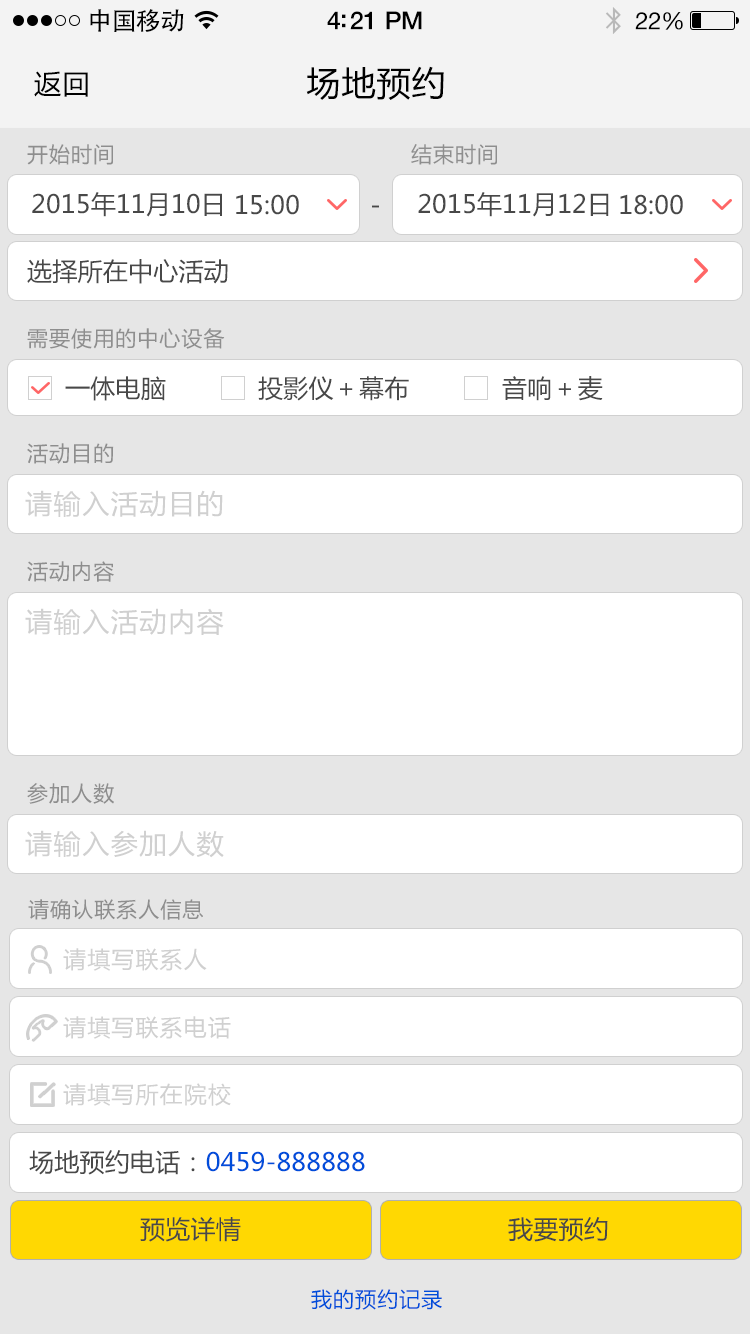
<style>
.page{position:relative;width:750px;height:1334px;background:#ffffff}
.page>*{position:absolute;margin:0}
.t1{font:25px "AdobeHeitiStd-Regular";letter-spacing:-0.025em;color:#000000}
.t2{font:25px "HelveticaNeue-Medium";letter-spacing:-0.02em;color:#000000}
.t3{font:24px "HelveticaNeue";letter-spacing:-0.02em;color:#000000}
.t4{font:27px "MicrosoftYaHei";letter-spacing:0.05em;color:#000000}
.t5{font:34px "MicrosoftYaHei";letter-spacing:0.03em;color:#000000}
.t6{font:21px "MicrosoftYaHei";letter-spacing:0.05em;color:#8e8e8e}
.t7{font:25px "MicrosoftYaHei";letter-spacing:0.01em;color:#555555}
.t8{font:27px "MicrosoftYaHei";letter-spacing:0.05em;color:#d0d0d0}
.t9{font:23px "MicrosoftYaHei";letter-spacing:0.05em;color:#d0d0d0}
.t10{font:25px "MicrosoftYaHei";letter-spacing:0.01em;color:#004dda}
.t11{font:25px "MicrosoftYaHei";letter-spacing:0.01em;color:#484848}
.t12{font:21px "MicrosoftYaHei";letter-spacing:0.05em;color:#004dda}
</style>
<div class="page">
<p class="t1" style="left:90px;top:9px;width:94px;height:23px">中国移动</p>
<p class="t2" style="left:327px;top:11px;width:95px;height:19px">4:21 PM</p>
<p class="t3" style="left:635px;top:12px;width:48px;height:18px">22%</p>
<p class="t4" style="left:34px;top:71px;width:54px;height:26px">返回</p>
<p class="t5" style="left:306px;top:66px;width:138px;height:34px">场地预约</p>
<p class="t6" style="left:27px;top:144px;width:86px;height:21px">开始时间</p>
<p class="t6" style="left:411px;top:144px;width:86px;height:21px">结束时间</p>
<p class="t7" style="left:32px;top:192px;width:190px;height:25px">2015年11月10日</p>
<p class="t7" style="left:236px;top:194px;width:63px;height:21px">15:00</p>
<p class="t7" style="left:418px;top:192px;width:191px;height:25px">2015年11月12日</p>
<p class="t7" style="left:620px;top:194px;width:63px;height:21px">18:00</p>
<p class="t7" style="left:372px;top:205px;width:7px;height:3px">-</p>
<p class="t7" style="left:27px;top:259px;width:201px;height:25px">选择所在中心活动</p>
<p class="t6" style="left:27px;top:328px;width:198px;height:21px">需要使用的中心设备</p>
<p class="t7" style="left:65px;top:376px;width:101px;height:25px">一体电脑</p>
<p class="t7" style="left:258px;top:376px;width:151px;height:25px">投影仪＋幕布</p>
<p class="t7" style="left:502px;top:376px;width:101px;height:25px">音响＋麦</p>
<p class="t6" style="left:27px;top:443px;width:87px;height:21px">活动目的</p>
<p class="t8" style="left:25px;top:490px;width:198px;height:27px">请输入活动目的</p>
<p class="t6" style="left:27px;top:561px;width:87px;height:21px">活动内容</p>
<p class="t8" style="left:25px;top:608px;width:199px;height:27px">请输入活动内容</p>
<p class="t6" style="left:27px;top:783px;width:87px;height:21px">参加人数</p>
<p class="t8" style="left:25px;top:830px;width:199px;height:28px">请输入参加人数</p>
<p class="t6" style="left:28px;top:899px;width:175px;height:21px">请确认联系人信息</p>
<p class="t9" style="left:63px;top:948px;width:144px;height:23px">请填写联系人</p>
<p class="t9" style="left:63px;top:1016px;width:168px;height:23px">请填写联系电话</p>
<p class="t9" style="left:63px;top:1083px;width:168px;height:23px">请填写所在院校</p>
<p class="t10" style="left:29px;top:1150px;width:336px;height:25px"><span class="t11">场地预约电话：</span>0459-888888</p>
<p class="t7" style="left:140px;top:1217px;width:101px;height:25px">预览详情</p>
<p class="t7" style="left:508px;top:1217px;width:100px;height:25px">我要预约</p>
<p class="t12" style="left:311px;top:1289px;width:131px;height:21px">我的预约记录</p>
</div>
